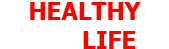
<style>
.page{position:relative;width:169px;height:49px;background:#ffffff}
.page>*{position:absolute;margin:0}
.t1{font:24px "Tahoma-Bold";color:#ff0000}
</style>
<div class="page">
<p class="t1" style="left:30px;top:2px;width:111px;height:47px;text-align:center">HEALTHY<br>       LIFE</p>
</div>
